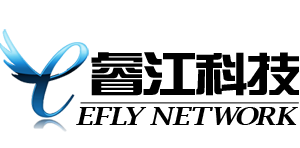
<style>
.page{position:relative;width:300px;height:148px;background:#ffffff}
.page>*{position:absolute;margin:0}
.t1{font:48px "BDZYJT--GB1-0";letter-spacing:0.1em;color:#000000;scale:1.2 1}
.t2{font:24px "LucidaBright-DemiItalic";letter-spacing:0.1em;color:#000000;scale:1.2 1}
</style>
<div class="page">
<p class="t1" style="left:91px;top:52px;width:52px;height:44px">睿</p>
<p class="t1" style="left:143px;top:52px;width:52px;height:43px">江</p>
<p class="t1" style="left:196px;top:52px;width:51px;height:44px">科</p>
<p class="t1" style="left:247px;top:52px;width:52px;height:43px">技</p>
<p class="t2" style="left:76px;top:107px;width:20px;height:18px">E</p>
<p class="t2" style="left:93px;top:107px;width:20px;height:18px">F</p>
<p class="t2" style="left:109px;top:107px;width:18px;height:18px">L</p>
<p class="t2" style="left:126px;top:107px;width:21px;height:18px">Y</p>
<p class="t2" style="left:150px;top:107px;width:26px;height:18px">N</p>
<p class="t2" style="left:172px;top:107px;width:20px;height:18px">E</p>
<p class="t2" style="left:192px;top:107px;width:21px;height:18px">T</p>
<p class="t2" style="left:214px;top:107px;width:28px;height:18px">W</p>
<p class="t2" style="left:236px;top:107px;width:23px;height:18px">O</p>
<p class="t2" style="left:255px;top:107px;width:21px;height:18px">R</p>
<p class="t2" style="left:275px;top:107px;width:23px;height:18px">K</p>
</div>
